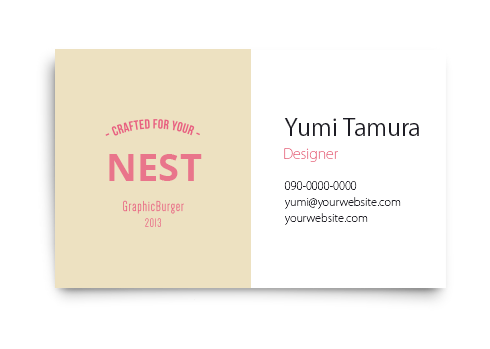
<style>
.page{position:relative;width:490px;height:349px;background:#ffffff}
.page>*{position:absolute;margin:0}
.t1{font:23px "KozGoPr6N-Regular";color:#1d1c24}
.t2{font:14px "KozGoPr6N-ExtraLight";color:#e9758b}
.t3{font:38.3px "OpenSans-Bold";color:#e9758b}
.t4{font:11px/16px "KozGoPr6N-ExtraLight";color:#1d1c24}
</style>
<div class="page">
<p class="t1" style="left:284px;top:118px;width:135px;height:18px">Yumi Tamura</p>
<p class="t2" style="left:284px;top:148px;width:54px;height:14px">Designer</p>
<p class="t3" style="left:109px;top:154px;width:93px;height:27px">NEST</p>
<p class="t4" style="left:284px;top:181px;width:117px;height:44px">090-0000-0000<br>yumi@yourwebsite.com<br>yourwebsite.com</p>
</div>
